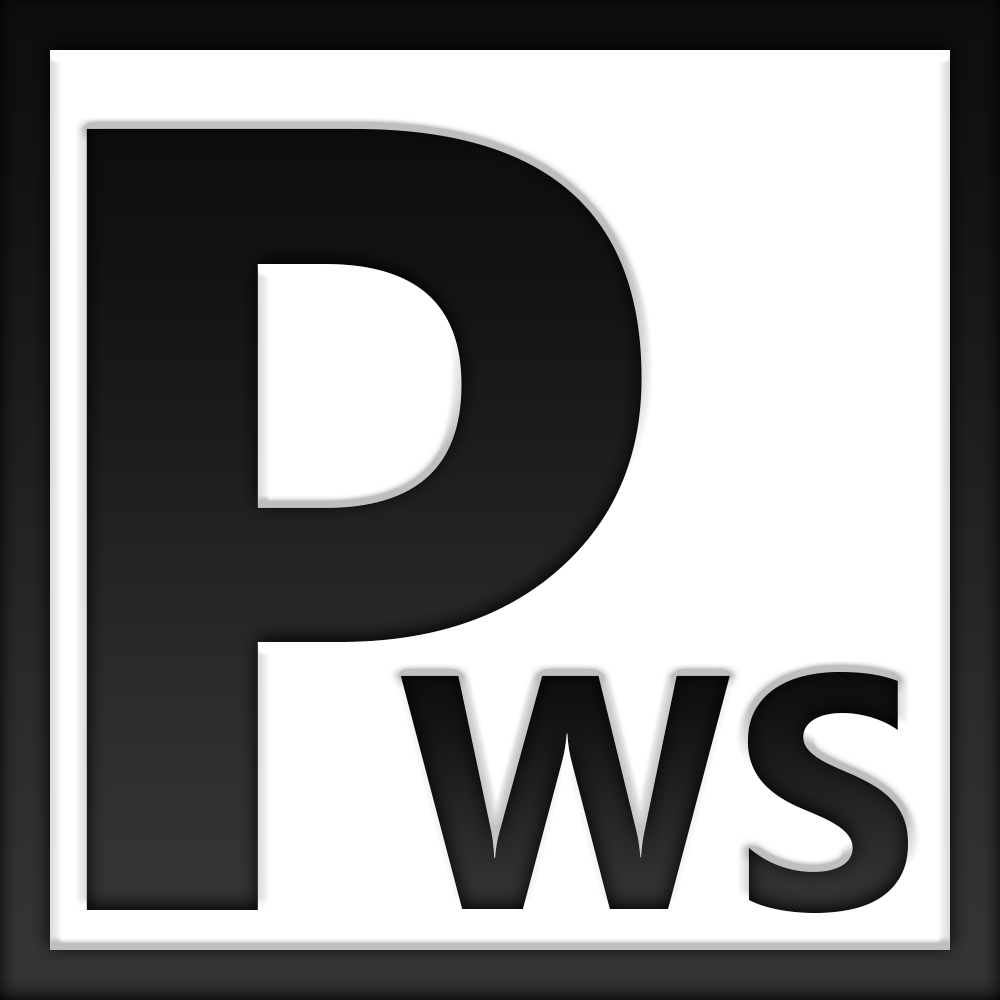
<style>
.page{position:relative;width:1000px;height:1000px;background:#ffffff}
.page>*{position:absolute;margin:0}
.t1{font:1115.9px "Ebrima-Bold";color:#1b1b1b}
.t2{font:333.3px "Ebrima-Bold";color:#1a1a1a}
</style>
<div class="page">
<p class="t1" style="left:86px;top:128px;width:556px;height:782px">P</p>
<p class="t2" style="left:400px;top:671px;width:508px;height:242px">WS</p>
</div>
